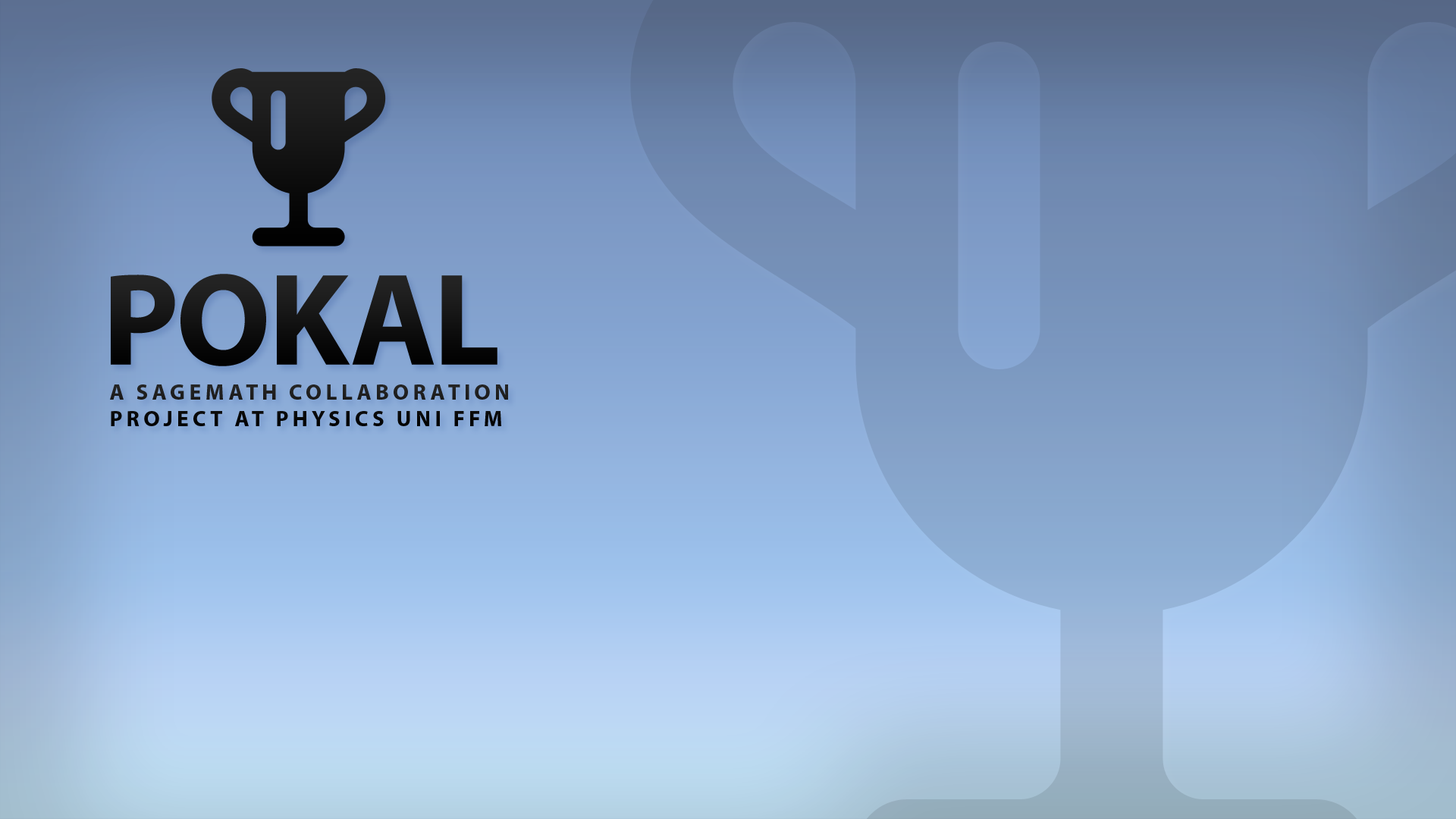
<style>
.page{position:relative;width:1456px;height:819px}
.page>*{position:absolute;margin:0}
.t1{font:132.2px "MyriadPro-Bold";letter-spacing:-0.02em;color:#010101}
.t2{font:22.3px "MyriadPro-Bold";letter-spacing:0.164em;color:#1a1a1a;text-transform:uppercase}
.t3{font:22.3px/63.1px "MyriadPro-Bold";letter-spacing:0.164em;color:#1a1a1a;text-transform:uppercase}
</style>
<div class="page">
<p class="t1" style="left:111px;top:274px;width:386px;height:92px">POKAL</p>
<p class="t2" style="left:110px;top:384px;width:398px;height:42px"><span class="t3">A SAGEMATH COLLABO</span>RATION<br>PROJECT AT PHYSICS UNI FFM</p>
</div>
